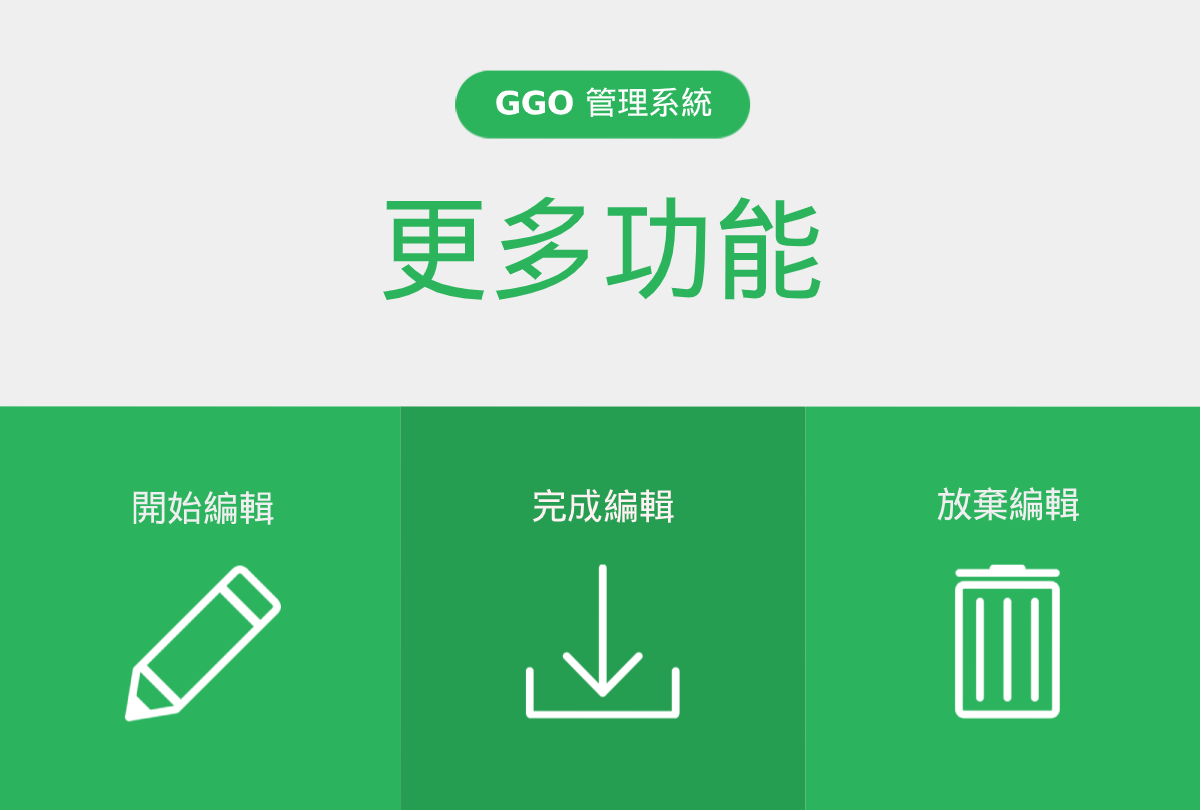
<style>
.page{position:relative;width:1200px;height:810px;background:#efefef}
.page>*{position:absolute;margin:0}
.t1{font:32.4px "NotoSansCJKtc-Bold";letter-spacing:-0.015em;color:#ffffff}
.t2{font:113.2px "NotoSansCJKtc-Bold";letter-spacing:-0.015em;color:#2cb45d}
.t3{font:36.5px "NotoSansCJKtc-Medium";letter-spacing:-0.015em;color:#efefef}
.t4{font:36.5px "NotoSansCJKtc-Medium";letter-spacing:-0.015em;color:#fff2f2}
</style>
<div class="page">
<p class="t1" style="left:496px;top:87px;width:216px;height:30px">GGO 管理系統</p>
<p class="t2" style="left:383px;top:196px;width:438px;height:104px">更多功能</p>
<p class="t3" style="left:133px;top:491px;width:141px;height:34px">開始編輯</p>
<p class="t4" style="left:533px;top:489px;width:141px;height:34px">完成編輯</p>
<p class="t3" style="left:937px;top:487px;width:142px;height:34px">放棄編輯</p>
</div>
